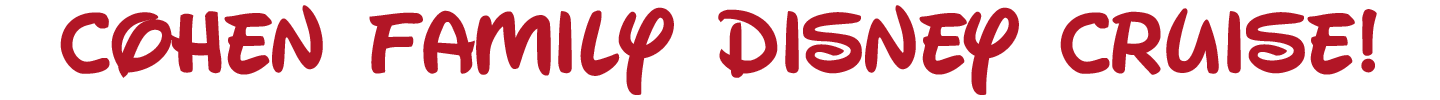
<style>
.page{position:relative;width:1440px;height:100px;background:#ffffff}
.page>*{position:absolute;margin:0}
.t1{font:86px "WaltographUI-Bold";letter-spacing:-0.025em;color:#b21626}
</style>
<div class="page">
<p class="t1" style="left:60px;top:5px;width:1317px;height:90px">Cohen Family Disney Cruise!</p>
</div>
